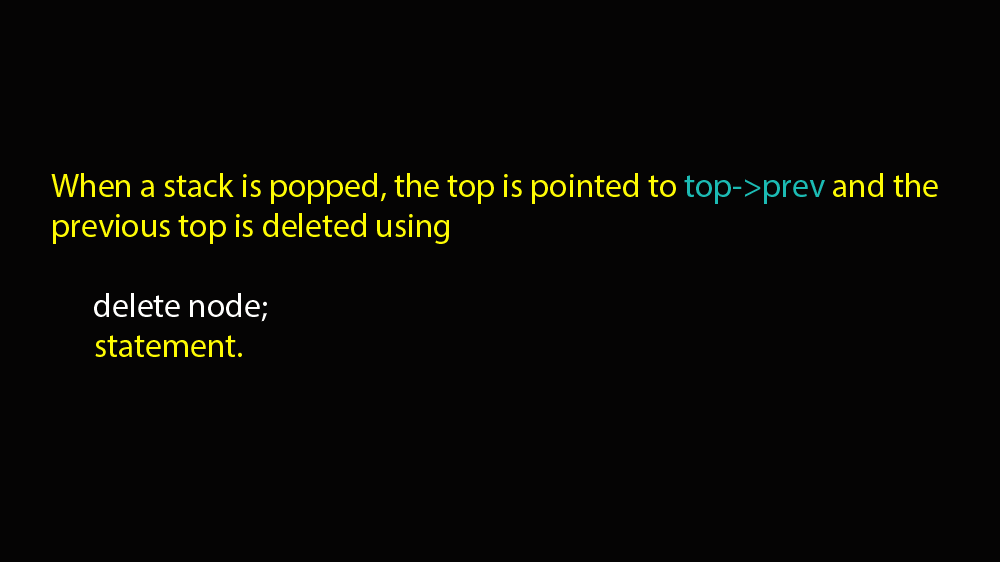
<style>
.page{position:relative;width:1000px;height:562px;background:#050404}
.page>*{position:absolute;margin:0}
.t1{font:33.3px "MyriadPro-Regular";color:#fefb04}
.t2{font:33.3px "MyriadPro-Regular";color:#1cbbb4}
.t3{font:33.3px "MyriadPro-Regular";color:#fffffe}
</style>
<div class="page">
<p class="t1" style="left:51px;top:173px;width:887px;height:184px">When a stack is popped, the top is pointed to <span class="t2">top-&gt;prev</span> and the previous top is deleted using <br><br>      <span class="t3">delete node;</span> <br>  statement.</p>
</div>
